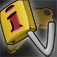
<style>
.page{position:relative;width:57px;height:57px}
.page>*{position:absolute;margin:0}
.t1{font:39.5px "CooperBlack"}
</style>
<div class="page">
<p class="t1" style="left:5px;top:5px;width:19px;height:28px;rotate:-25deg">i</p>
</div>
